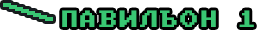
<style>
.page{position:relative;width:260px;height:32px;background:#ffffff}
.page>*{position:absolute;margin:0}
.t1{font:18.8px "PxPlus_IBM_BIOS";letter-spacing:0.075em;color:#39c773}
</style>
<div class="page">
<p class="t1" style="left:62px;top:10px;width:192px;height:17px">ПАВИЛЬОН 1</p>
</div>
